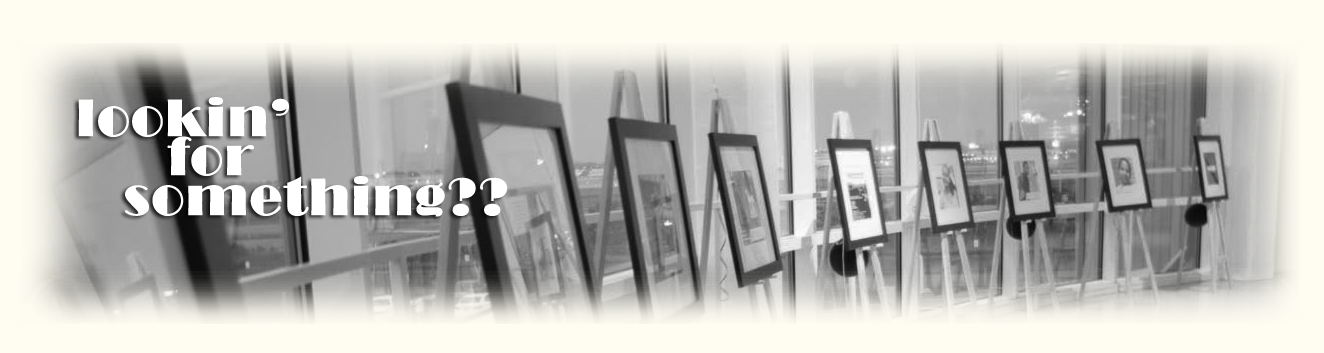
<style>
.page{position:relative;width:1324px;height:353px;background:#fffdf2}
.page>*{position:absolute;margin:0}
.t1{font:54.3px "Broadway";color:#ffffff;font-weight:bold}
</style>
<div class="page">
<p class="t1" style="left:78px;top:97px;width:211px;height:40px">lookin’</p>
<p class="t1" style="left:167px;top:136px;width:87px;height:40px">for</p>
<p class="t1" style="left:125px;top:176px;width:383px;height:41px">something??</p>
</div>
